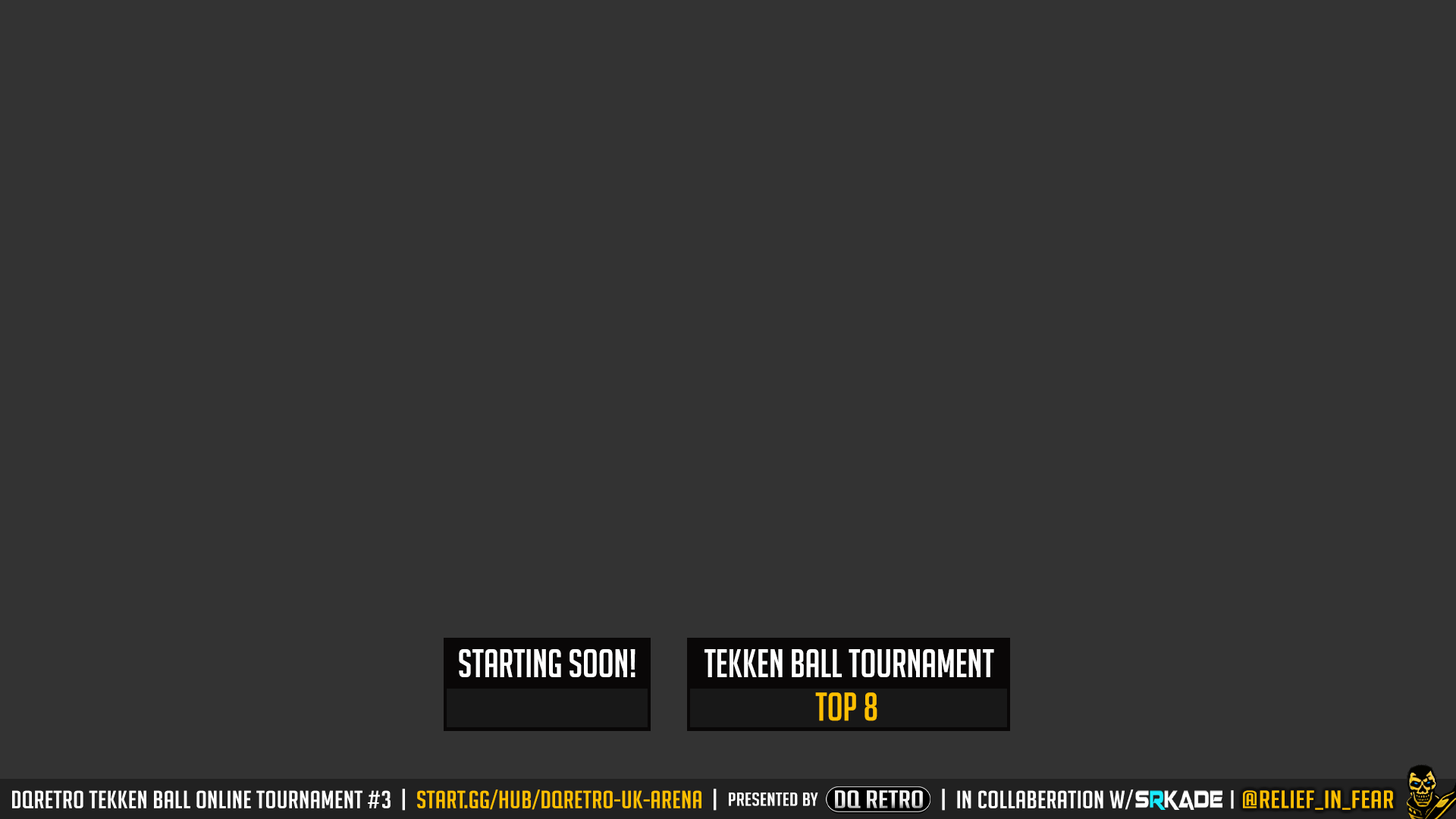
<style>
.page{position:relative;width:1456px;height:819px;background:#333333}
.page>*{position:absolute;margin:0}
.t1{font:39.1px "BigNoodleTitling";color:#ffffff}
.t2{font:39.1px "BigNoodleTitling";color:#febf00}
.t3{font:24.3px "BigNoodleTitling";letter-spacing:0.01em;color:#ffffff;scale:1.15 1}
.t4{font:24.3px "BigNoodleTitling";letter-spacing:0.01em;color:#febf00;scale:1.15 1}
.t5{font:18.3px "BigNoodleTitling";letter-spacing:0.01em;color:#ffffff;scale:1.21 1}
.t6{font:20.7px "BigNoodleTitling";letter-spacing:0.01em;color:#ffffff;scale:1.26 1}
.t7{font:24.3px "BigNoodleTitling";letter-spacing:0.02em;color:#febf00;scale:1.23 1}
</style>
<div class="page">
<p class="t1" style="left:459px;top:649px;width:176px;height:28px">starting soon!</p>
<p class="t1" style="left:704px;top:649px;width:290px;height:28px">tEKKEN BALL TOURNAMENT</p>
<p class="t2" style="left:815px;top:692px;width:62px;height:29px">TOP 8</p>
<p class="t3" style="left:12px;top:789px;width:1122px;height:22px">DQRETRO TEKKEN BALL ONLINE TOURNAMENT #3  |  <span class="t4">start.gg/hub/dqretro-uk-arena  </span>|                                               |  iN COLLABERATION W/</p>
<p class="t5" style="left:729px;top:792px;width:89px;height:14px">PRESENTED BY</p>
<p class="t6" style="left:1231px;top:790px;width:3px;height:19px">|</p>
<p class="t7" style="left:1243px;top:790px;width:151px;height:20px">@Relief_in_Fear</p>
</div>
